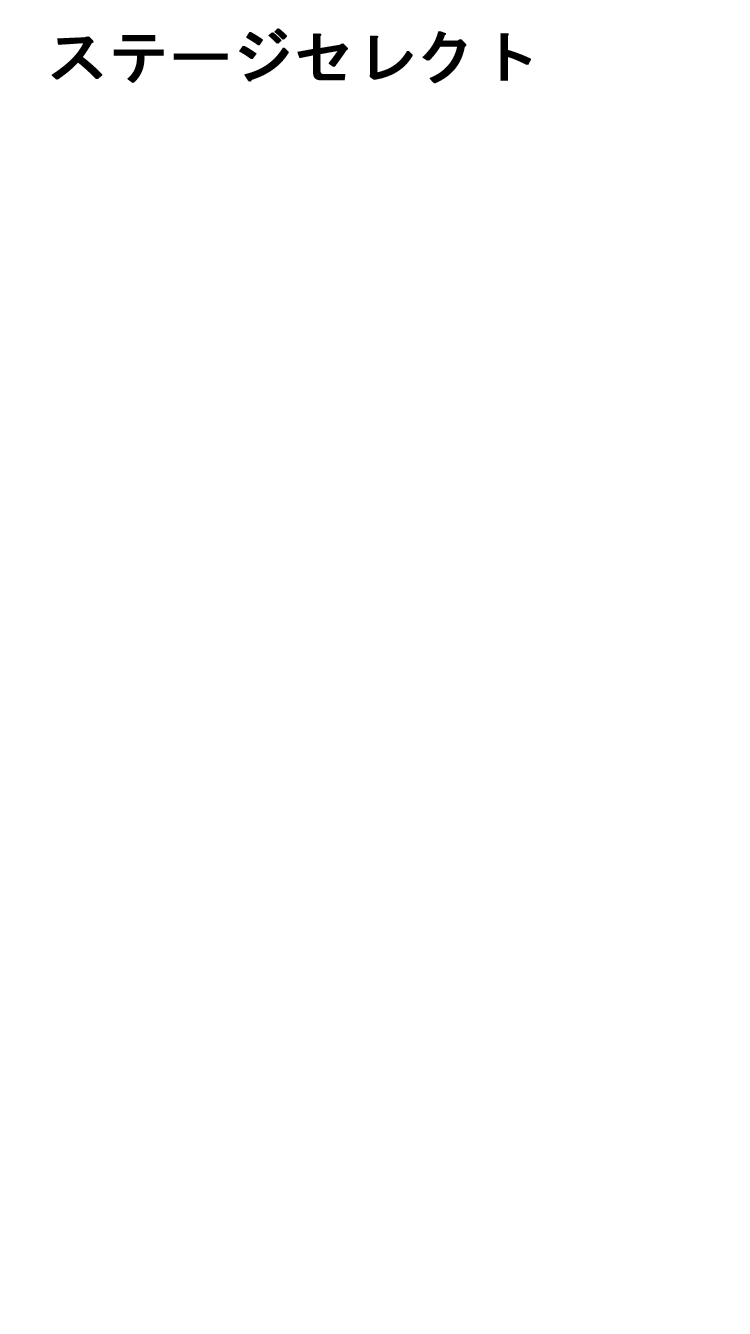
<style>
.page{position:relative;width:750px;height:1334px;background:#ffffff}
.page>*{position:absolute;margin:0}
.t1{font:60px "MS-Gothic";color:#000000;font-weight:bold}
</style>
<div class="page">
<p class="t1" style="left:51px;top:28px;width:480px;height:56px">ステージセレクト</p>
</div>
